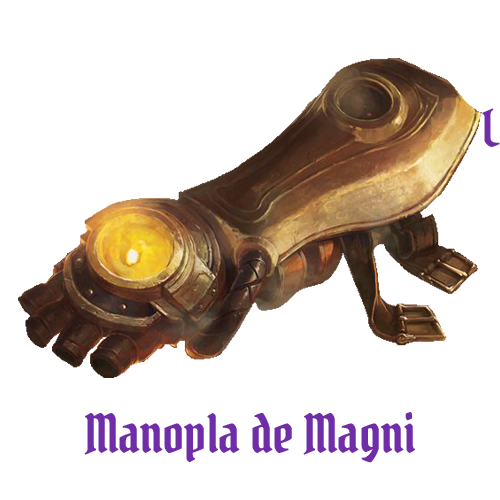
<style>
.page{position:relative;width:500px;height:500px;background:#ffffff}
.page>*{position:absolute;margin:0}
.t1{font:52.1px "PirataOne-Regular";color:#6f2da8}
</style>
<div class="page">
<p class="t1" style="left:84px;top:412px;width:331px;height:51px">Manopla de Magni</p>
</div>
